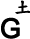
<style>
.page{position:relative;width:30px;height:39px;background:#ffffff}
.page>*{position:absolute;margin:0}
.t1{font:18px "DFKaiShu-SB-Estd-BF";color:#000000;font-weight:bold}
.t2{font:27px "ArialMT";color:#000000;font-weight:bold}
</style>
<div class="page">
<p class="t1" style="left:15px;top:0px;width:16px;height:14px">土</p>
<p class="t2" style="left:1px;top:17px;width:19px;height:22px">G</p>
</div>
